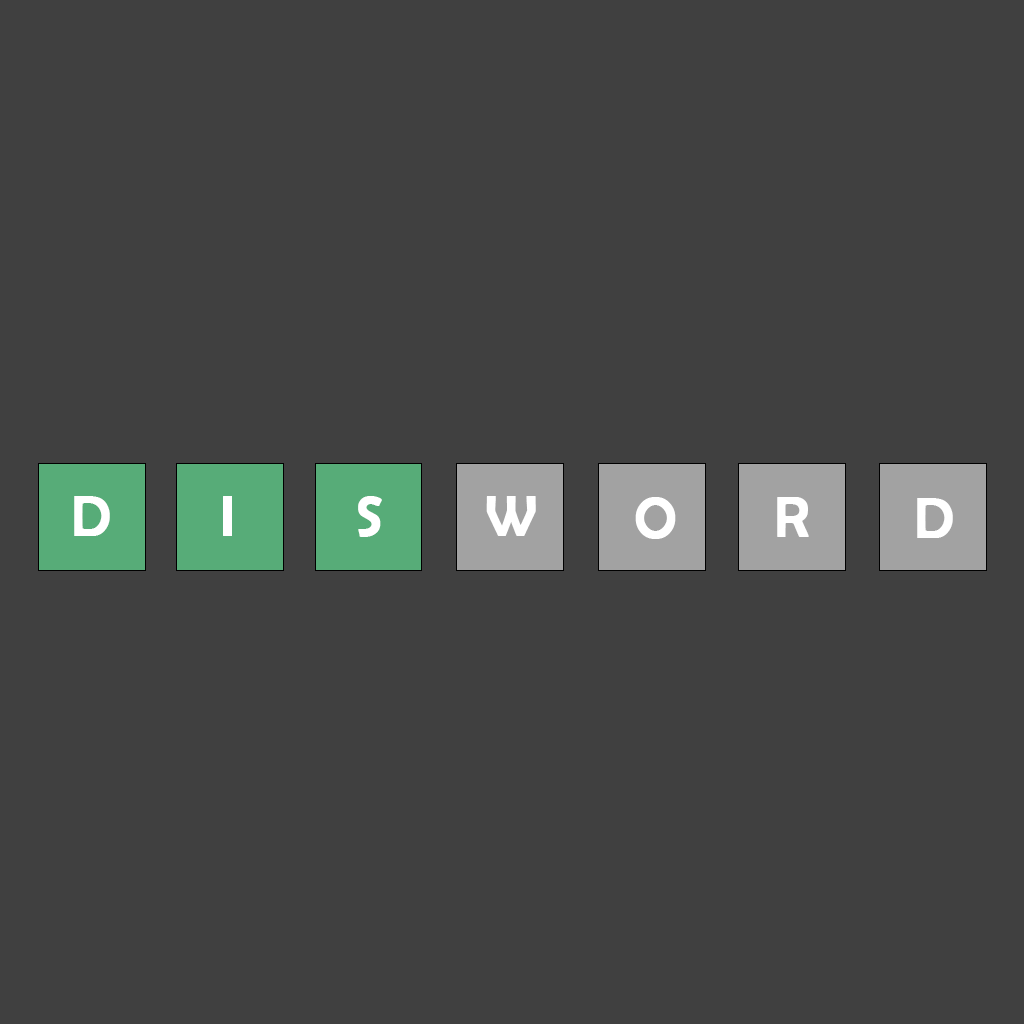
<style>
.page{position:relative;width:1024px;height:1024px;background:#404040}
.page>*{position:absolute;margin:0}
.t1{font:56.5px "BerlinSansFB-Reg";color:#ffffff;font-weight:bold}
</style>
<div class="page">
<p class="t1" style="left:74px;top:496px;width:36px;height:40px">D</p>
<p class="t1" style="left:358px;top:496px;width:24px;height:41px">S</p>
<p class="t1" style="left:486px;top:496px;width:50px;height:40px">W</p>
<p class="t1" style="left:635px;top:497px;width:41px;height:42px">O</p>
<p class="t1" style="left:777px;top:497px;width:32px;height:40px">R</p>
<p class="t1" style="left:917px;top:498px;width:36px;height:40px">D</p>
</div>
